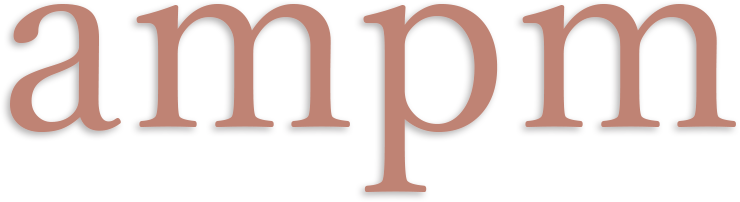
<style>
.page{position:relative;width:740px;height:202px;background:#ffffff}
.page>*{position:absolute;margin:0}
.t1{font:272.1px "YuMincho-Regular";color:#bf8374}
</style>
<div class="page">
<p class="t1" style="left:10px;top:4px;width:726px;height:188px">ampm</p>
</div>
